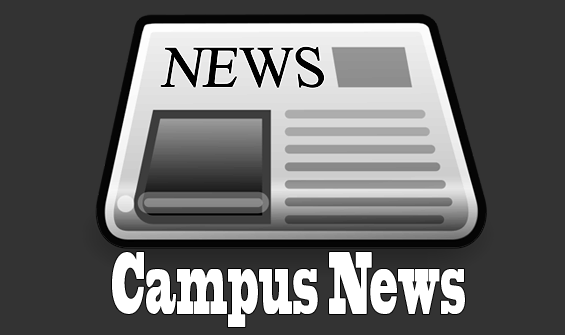
<style>
.page{position:relative;width:565px;height:335px;background:#333333}
.page>*{position:absolute;margin:0}
.t1{font:83.3px "BlackoakStd";color:#ffffff;scale:0.26 1}
</style>
<div class="page">
<p class="t1" style="left:112px;top:252px;width:353px;height:75px">Campus News</p>
</div>
